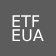
<style>
.page{position:relative;width:56px;height:56px;background:#5c5c5c}
.page>*{position:absolute;margin:0}
.t1{font:16px "DejaVuSans";color:#ffffff}
</style>
<div class="page">
<p class="t1" style="left:12px;top:15px;width:32px;height:27px">ETF<br>EUA</p>
</div>
